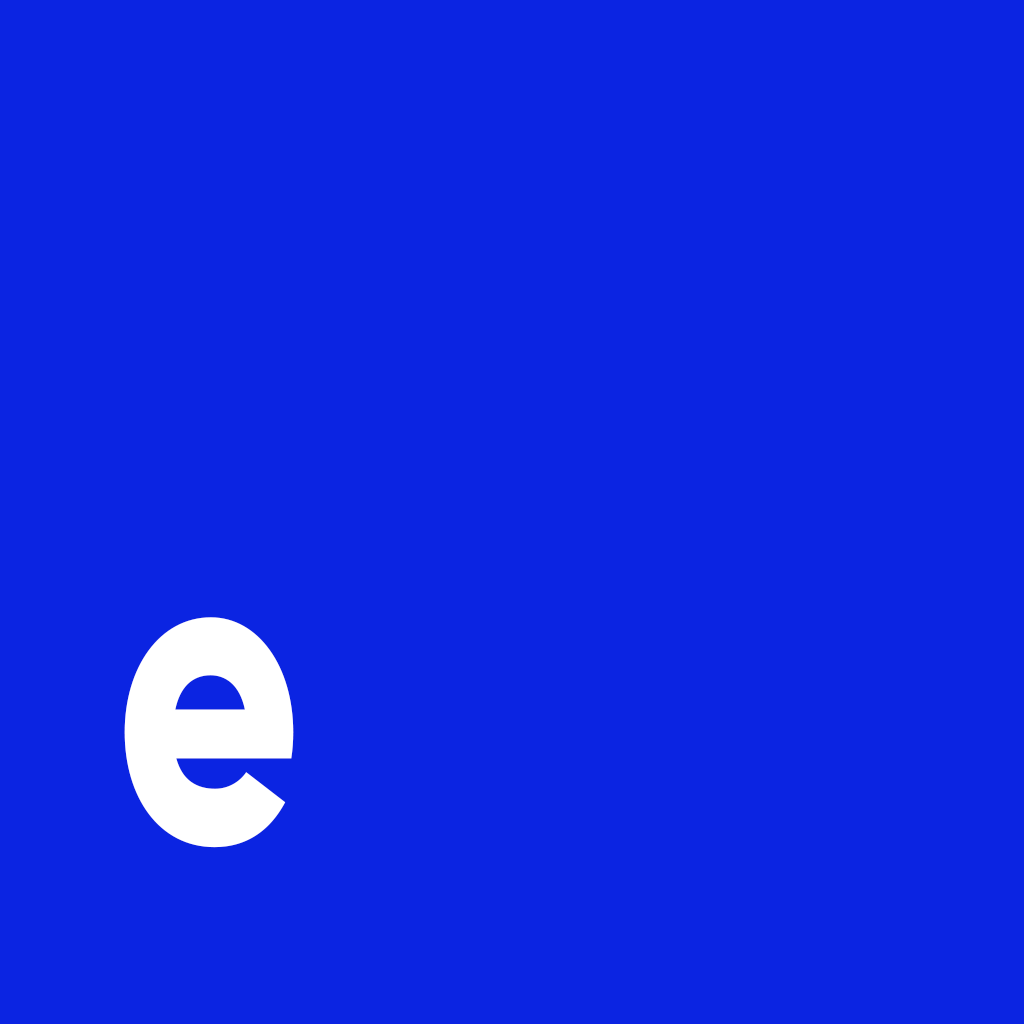
<style>
.page{position:relative;width:1024px;height:1024px;background:#0b24e2}
.page>*{position:absolute;margin:0}
.t1{font:435.1px "Gilroy-ExtraBold";color:#ffffff;scale:0.74 1}
</style>
<div class="page">
<p class="t1" style="left:124px;top:617px;width:170px;height:231px">e</p>
</div>
